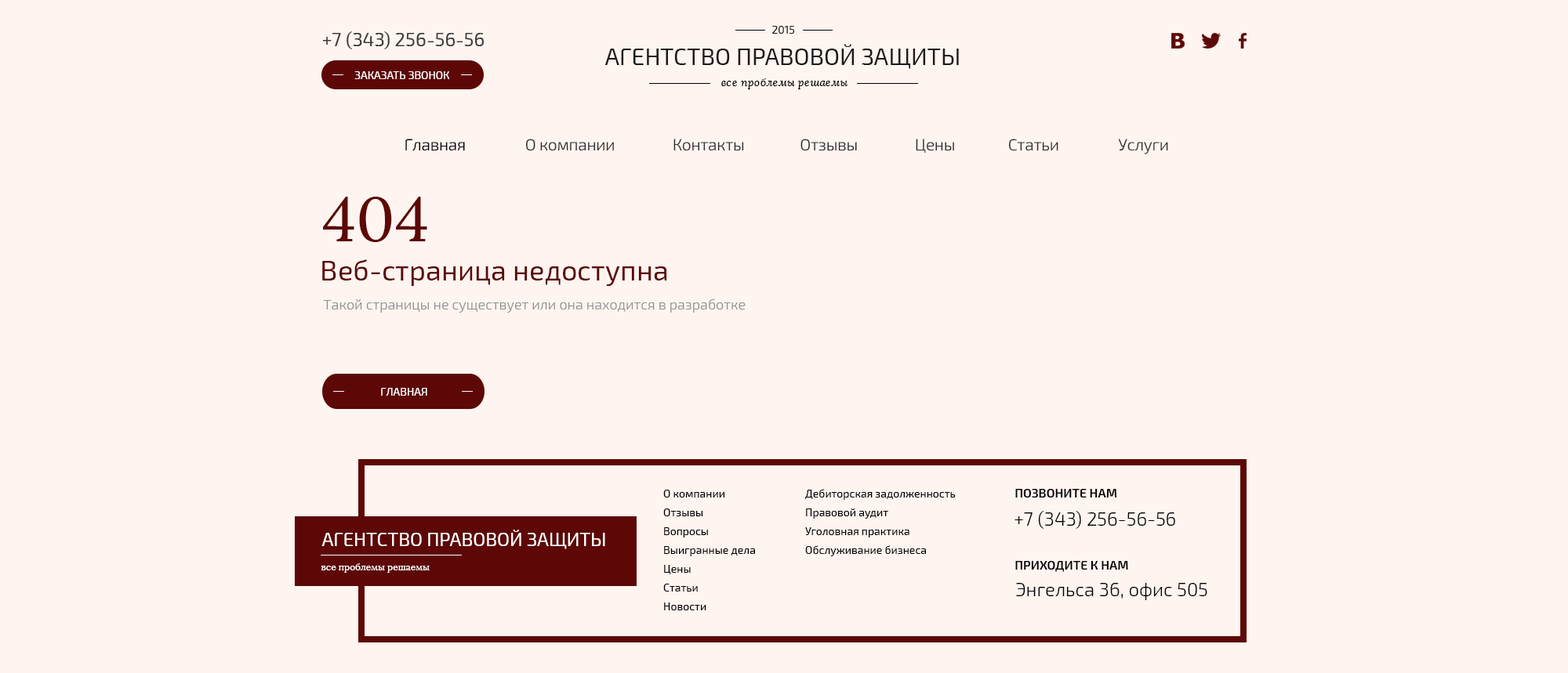
<style>
.page{position:relative;width:1568px;height:673px;background:#fef4f0}
.page>*{position:absolute;margin:0}
.t1{font:11px "Exo2-Regular";color:#1a1a1a;text-transform:uppercase}
.t2{font:18.8px "Exo2-Regular";color:#3a3a3a}
.t3{font:23.5px "Exo2-Regular";color:#1a1a1a;text-transform:uppercase}
.t4{font:11px "Exo2-Regular";color:#ffffff;text-transform:uppercase}
.t5{font:11px "Lora-Italic";color:#000000}
.t6{font:15.7px "Exo2-Light";color:#000000}
.t7{font:15.7px "Exo2-Light";color:#2f2f2f}
.t8{font:62.7px "Lora-Regular";color:#5d0806}
.t9{font:28.2px "Exo2-Regular";color:#5d0806}
.t10{font:14.1px "Exo2-Light";color:#909090}
.t11{font:11px/18.8px "Exo2-Regular";color:#000000}
.t12{font:12.5px "Exo2-SemiBold";color:#000000;text-transform:uppercase}
.t13{font:18.8px "Exo2-Light";color:#000000}
.t14{font:18.8px "Exo2-Regular";color:#ffffff;text-transform:uppercase}
.t15{font:9.4px "Lora-Regular";color:#ffffff}
</style>
<div class="page">
<p class="t1" style="left:772px;top:26px;width:23px;height:8px">2015</p>
<p class="t2" style="left:322px;top:31px;width:162px;height:18px">+7 (343) 256-56-56</p>
<p class="t3" style="left:604px;top:44px;width:355px;height:25px">Агентство правовой защиты</p>
<p class="t4" style="left:354px;top:71px;width:96px;height:8px">Заказать звонок</p>
<p class="t5" style="left:721px;top:78px;width:127px;height:11px">все проблемы решаемы</p>
<p class="t6" style="left:405px;top:139px;width:60px;height:12px">Главная</p>
<p class="t7" style="left:526px;top:139px;width:88px;height:12px">О компании</p>
<p class="t7" style="left:673px;top:139px;width:71px;height:12px">Контакты</p>
<p class="t7" style="left:800px;top:139px;width:57px;height:12px">Отзывы</p>
<p class="t7" style="left:916px;top:139px;width:38px;height:14px">Цены</p>
<p class="t7" style="left:1009px;top:139px;width:49px;height:12px">Статьи</p>
<p class="t7" style="left:1118px;top:139px;width:50px;height:15px">Услуги</p>
<p class="t8" style="left:323px;top:197px;width:104px;height:45px">404</p>
<p class="t9" style="left:322px;top:260px;width:345px;height:26px">Веб-страница недоступна</p>
<p class="t10" style="left:323px;top:299px;width:423px;height:14px">Такой страницы не существует или она находится в разработке</p>
<p class="t4" style="left:381px;top:388px;width:46px;height:8px">главная</p>
<p class="t11" style="left:663px;top:490px;width:92px;height:121px">О компании<br>Отзывы<br>Вопросы<br>Выигранные дела<br>Цены<br>Статьи<br>Новости</p>
<p class="t11" style="left:805px;top:489px;width:151px;height:68px">Дебиторская задолженность<br>Правовой аудит<br>Уголовная практика<br>Обслуживание бизнеса</p>
<p class="t12" style="left:1015px;top:489px;width:102px;height:9px">Позвоните нам</p>
<p class="t13" style="left:1014px;top:511px;width:161px;height:18px">+7 (343) 256-56-56</p>
<p class="t14" style="left:321px;top:530px;width:284px;height:20px">Агентство правовой защиты</p>
<p class="t15" style="left:321px;top:564px;width:109px;height:9px">все проблемы решаемы</p>
<p class="t12" style="left:1015px;top:561px;width:113px;height:11px">приходите к нам</p>
<p class="t13" style="left:1016px;top:583px;width:191px;height:18px">Энгельса 36, офис 505</p>
</div>
